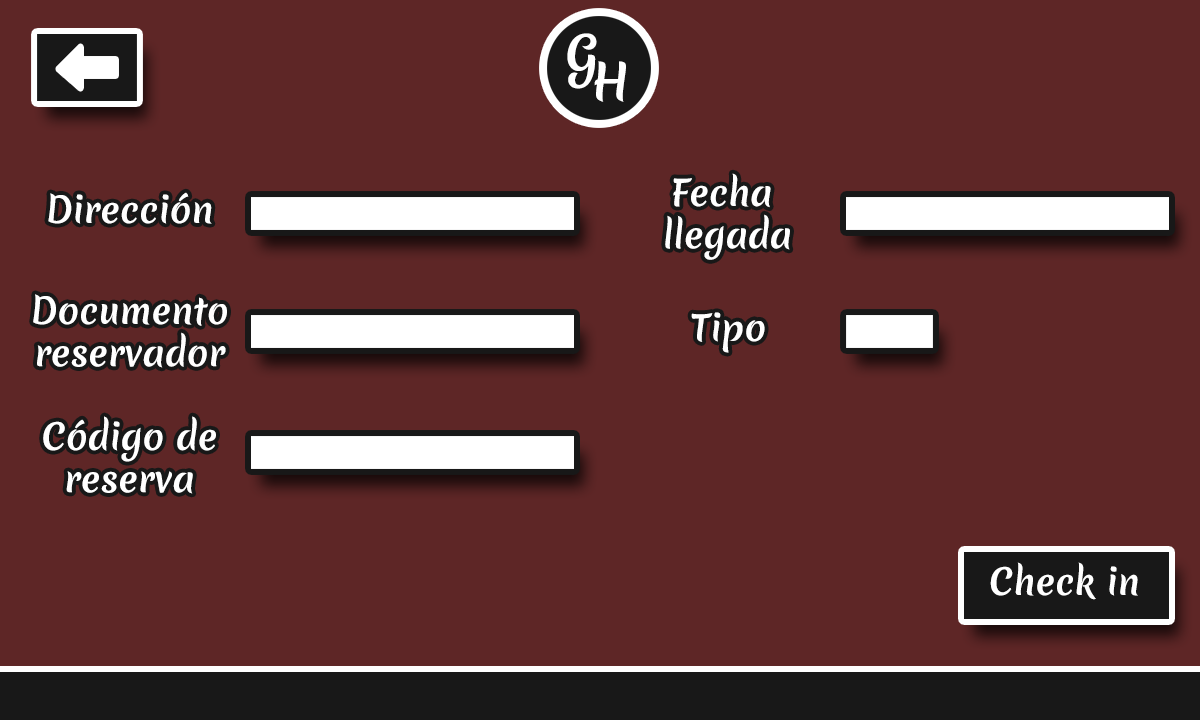
<style>
.page{position:relative;width:1200px;height:720px;background:#5e2626}
.page>*{position:absolute;margin:0}
.t1{font:48.4px "MeriendaOne-Regular";color:#ffffff}
.t2{font:35.1px/42.3px "MeriendaOne-Regular";color:#ffffff}
.t3{font:35.1px "MeriendaOne-Regular";color:#ffffff}
</style>
<div class="page">
<p class="t1" style="left:567px;top:33px;width:30px;height:56px">G</p>
<p class="t1" style="left:594px;top:61px;width:32px;height:41px">H</p>
<p class="t2" style="left:665px;top:173px;width:125px;height:87px;text-align:center">Fecha <br>llegada</p>
<p class="t3" style="left:48px;top:192px;width:164px;height:32px">Dirección</p>
<p class="t2" style="left:33px;top:294px;width:194px;height:74px;text-align:center">Documento<br>reservador</p>
<p class="t3" style="left:691px;top:312px;width:74px;height:41px">Tipo</p>
<p class="t2" style="left:43px;top:416px;width:173px;height:78px;text-align:center">Código de<br>reserva</p>
<p class="t3" style="left:990px;top:562px;width:148px;height:38px">Check in</p>
</div>
